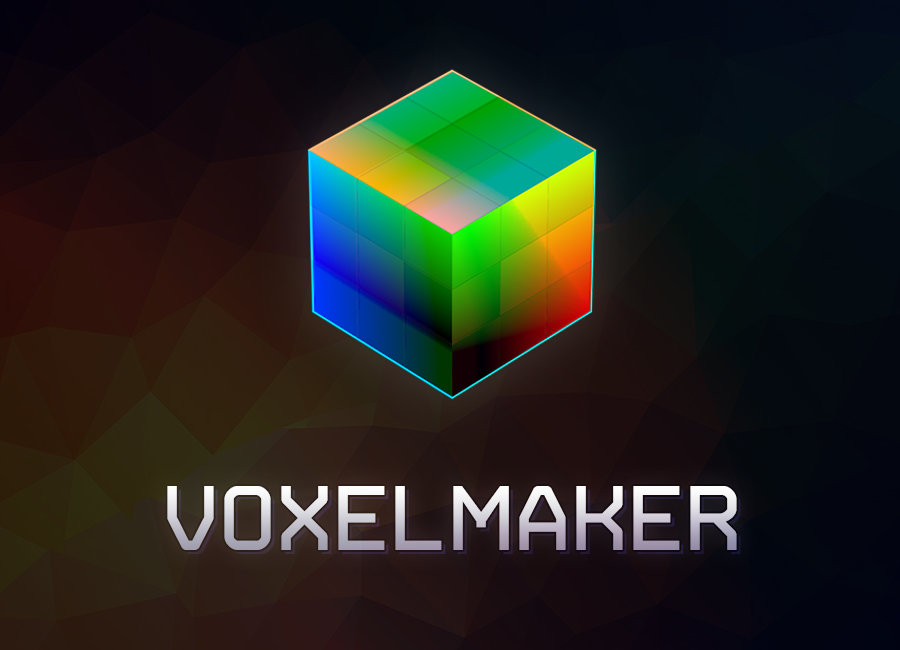
<style>
.page{position:relative;width:900px;height:650px}
.page>*{position:absolute;margin:0}
.t1{font:91.5px "0Arame-Regular";letter-spacing:0.025em}
</style>
<div class="page">
<p class="t1" style="left:167px;top:486px;width:570px;height:64px">VOXELMAKER</p>
</div>
